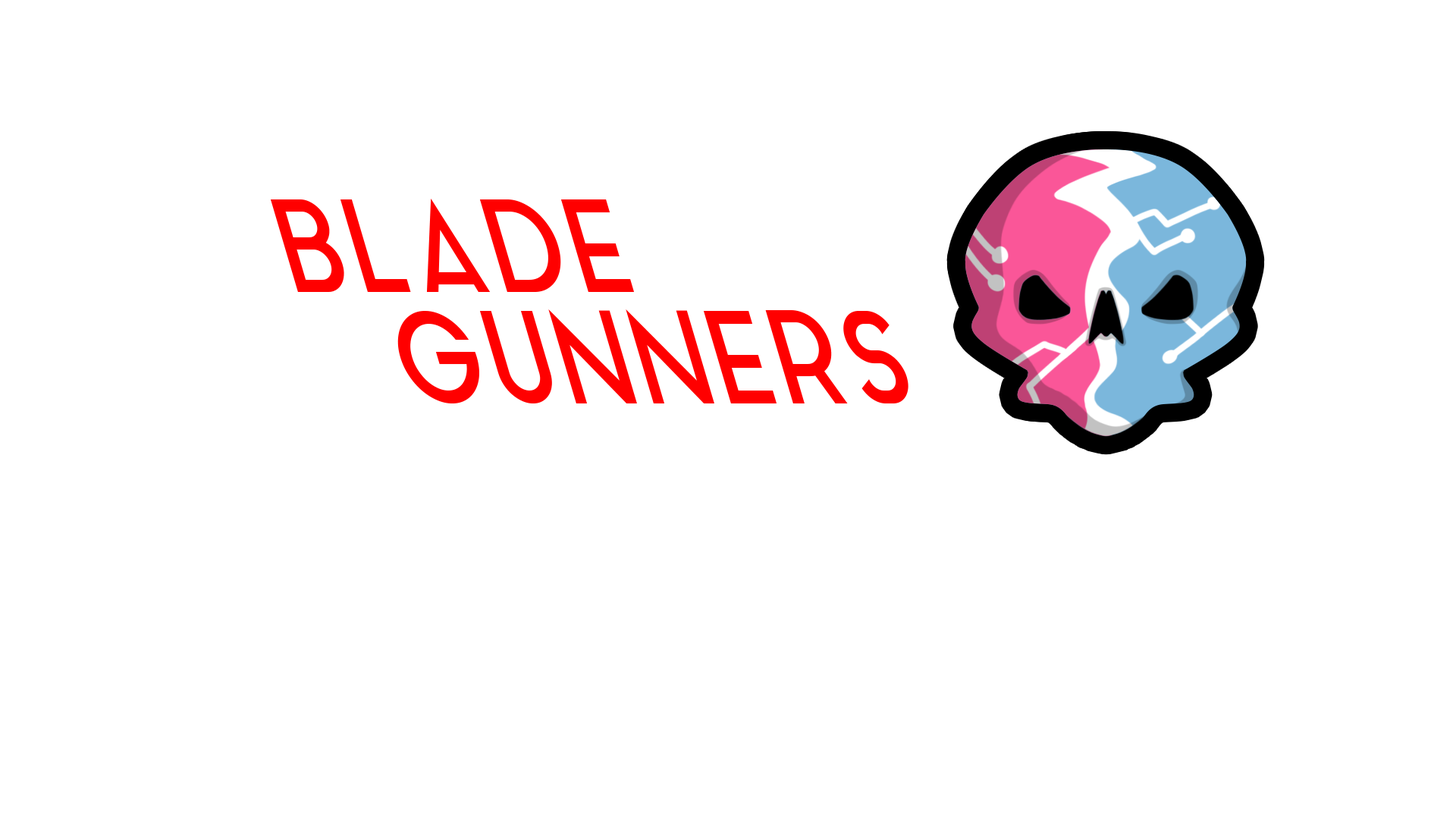
<style>
.page{position:relative;width:1456px;height:819px;background:#ffffff}
.page>*{position:absolute;margin:0}
.t1{font:131.8px "AquaGrotesque";color:#ff0000;scale:0.8 1}
</style>
<div class="page">
<p class="t1" style="left:270px;top:199px;width:365px;height:93px">BLADE</p>
<p class="t1" style="left:397px;top:309px;width:511px;height:94px">GUNNERS</p>
</div>
